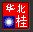
<style>
.page{position:relative;width:33px;height:32px;background:#f20000}
.page>*{position:absolute;margin:0}
.t1{font:10.4px "SimSun";color:#ffffff}
.t2{font:11.7px "SimSun";color:#ffffff}
</style>
<div class="page">
<p class="t1" style="left:6px;top:4px;width:19px;height:9px">华北</p>
<p class="t2" style="left:16px;top:15px;width:11px;height:12px">桂</p>
</div>
